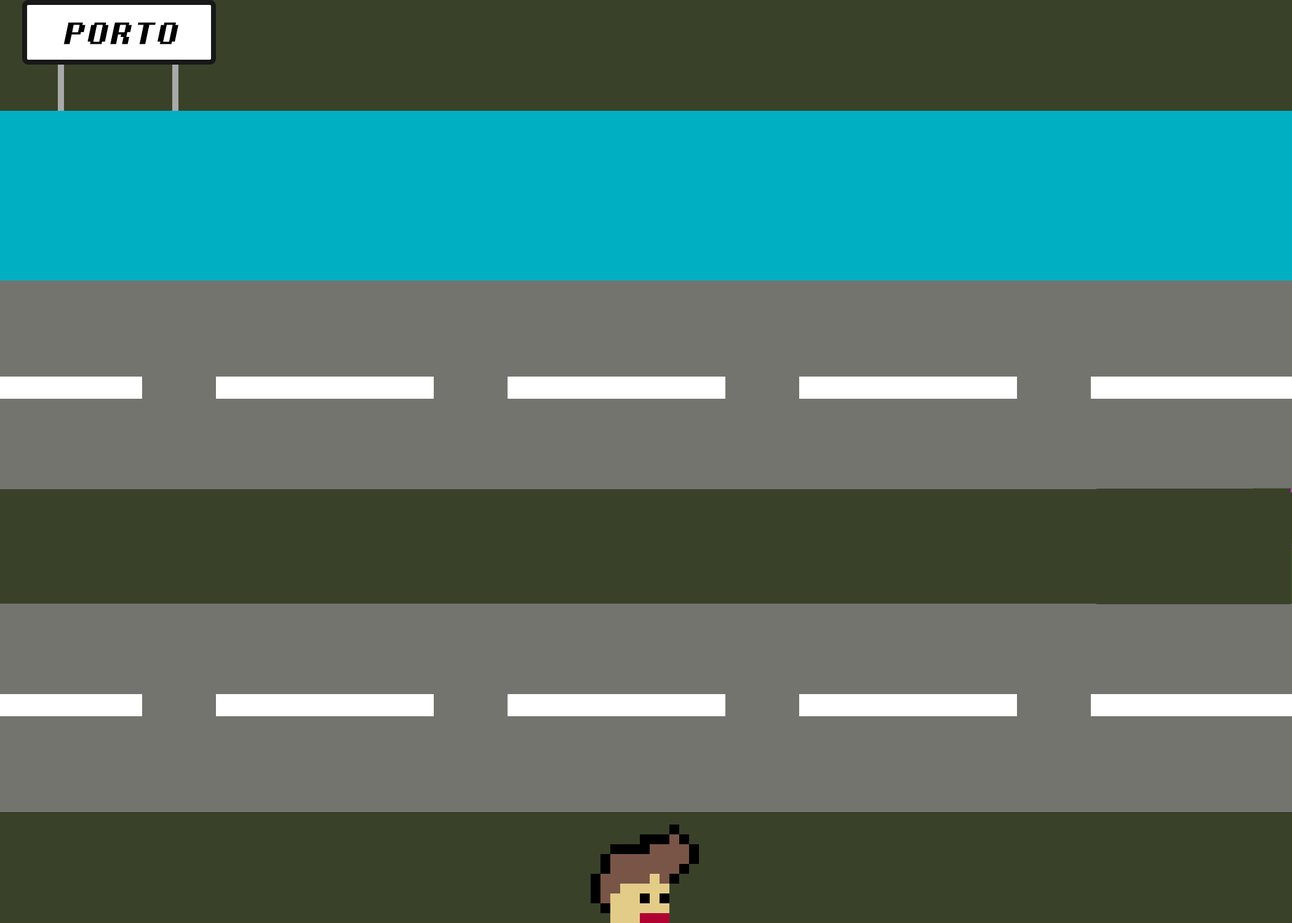
<style>
.page{position:relative;width:1292px;height:923px;background:#74746e}
.page>*{position:absolute;margin:0}
.t1{font:30.8px "Fixedsys";color:#000000;font-style:italic;scale:1.21 1}
</style>
<div class="page">
<p class="t1" style="left:63px;top:22px;width:115px;height:22px">PORTO</p>
</div>
